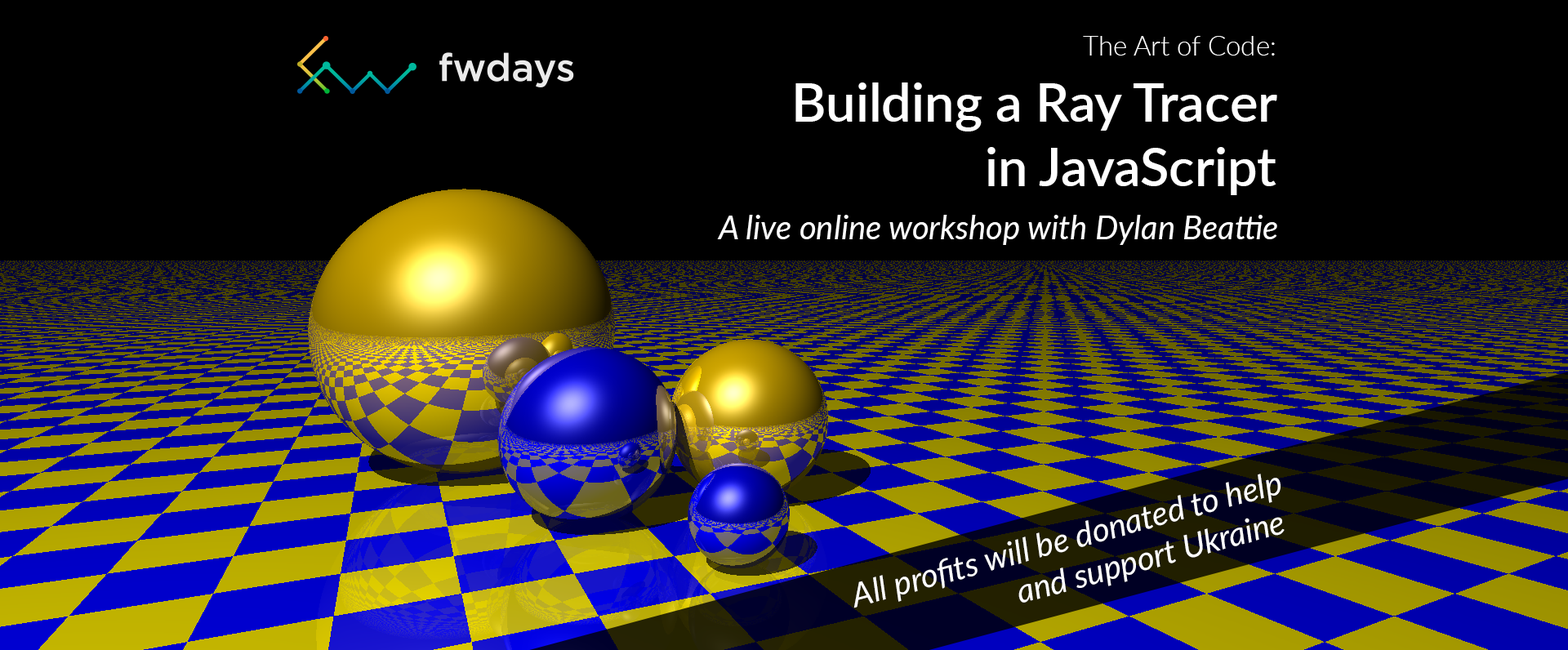
<style>
.page{position:relative;width:1568px;height:650px;background:#000000}
.page>*{position:absolute;margin:0}
.t1{font:53.1px/66.2px "Lato-Semibold";color:#ffffff}
.t2{font:26.9px/76.8px "Lato-Light";color:#ffffff}
.t3{font:53.1px/64.5px "Lato-Semibold";color:#ffffff}
.t4{font:32.7px "Lato-Italic";color:#ffffff}
</style>
<div class="page">
<p class="t1" style="left:795px;top:36px;width:482px;height:159px;text-align:right"><span class="t2">The Art of Code:<br></span>Building a Ray Tracer<br><span class="t3">in JavaScript</span></p>
<p class="t4" style="left:717px;top:215px;width:560px;height:30px">A live online workshop with Dylan Beattie</p>
<p class="t4" style="left:853px;top:474px;width:432px;height:134px;text-align:right;rotate:-15deg">All profits will be donated to help <br>and support Ukraine</p>
</div>
